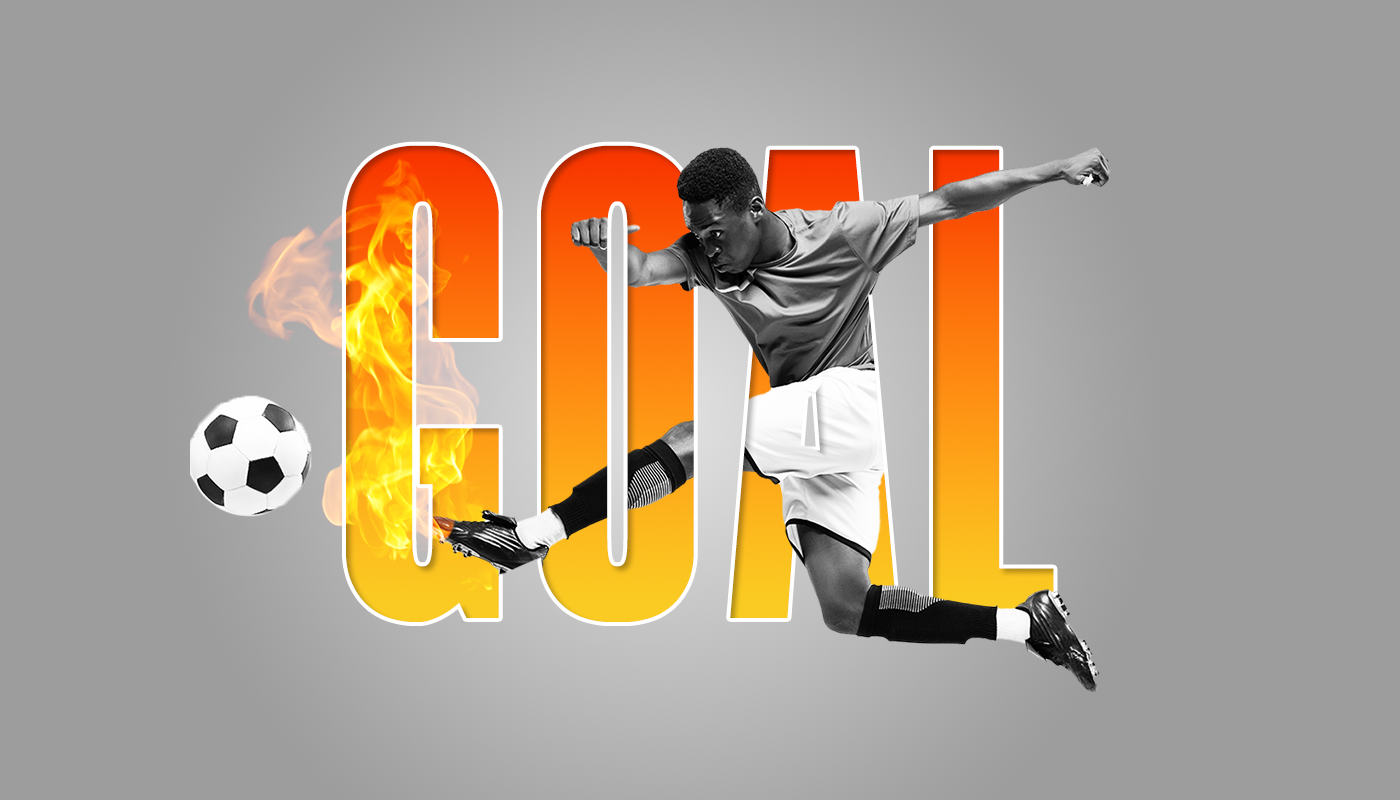
<style>
.page{position:relative;width:1400px;height:800px;background:#9d9d9d}
.page>*{position:absolute;margin:0}
.t1{font:670px "Morganite-Black";letter-spacing:0.04em}
</style>
<div class="page">
<p class="t1" style="left:345px;top:145px;width:709px;height:477px">GOAL</p>
</div>
